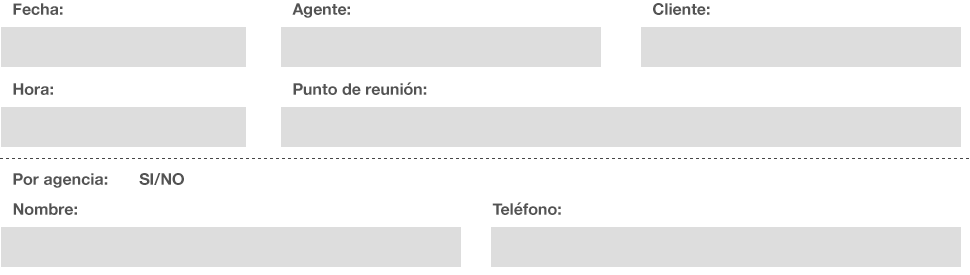
<style>
.page{position:relative;width:970px;height:275px;background:#ffffff}
.page>*{position:absolute;margin:0}
.t1{font:16px "HelveticaNeue-Bold";color:#535353}
</style>
<div class="page">
<p class="t1" style="left:13px;top:3px;width:50px;height:12px">Fecha:</p>
<p class="t1" style="left:292px;top:3px;width:58px;height:15px">Agente:</p>
<p class="t1" style="left:653px;top:3px;width:57px;height:12px">Cliente:</p>
<p class="t1" style="left:13px;top:83px;width:40px;height:12px">Hora:</p>
<p class="t1" style="left:293px;top:82px;width:134px;height:13px">Punto de reunión:</p>
<p class="t1" style="left:13px;top:173px;width:171px;height:15px">Por agencia:       SI/NO</p>
<p class="t1" style="left:13px;top:203px;width:64px;height:12px">Nombre:</p>
<p class="t1" style="left:492px;top:202px;width:69px;height:13px">Teléfono:</p>
</div>
